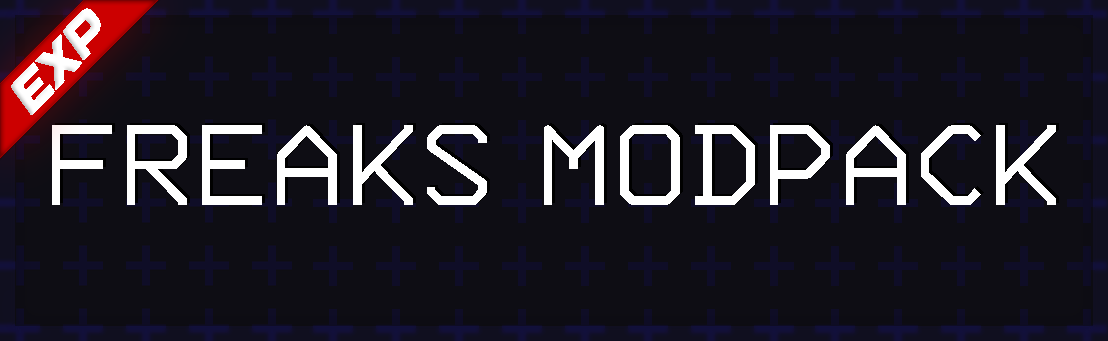
<style>
.page{position:relative;width:1108px;height:341px;background:#0e0d14}
.page>*{position:absolute;margin:0}
.t1{font:52.1px "DesignerRegular";color:#ffffff}
.t2{font:145px "3270-Regular";color:#ffffff}
</style>
<div class="page">
<p class="t1" style="left:11px;top:8px;width:90px;height:107px;rotate:-46deg">EXP</p>
<p class="t2" style="left:52px;top:125px;width:1004px;height:80px">FREAKS MODPACK</p>
</div>
